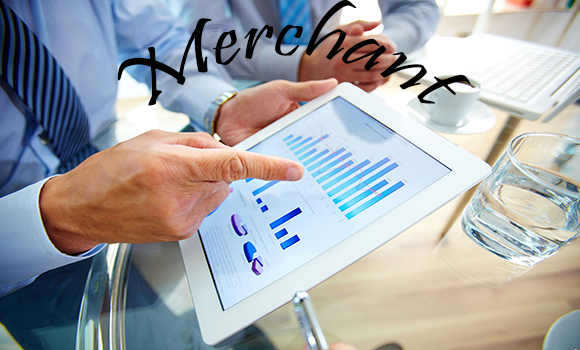
<style>
.page{position:relative;width:580px;height:350px}
.page>*{position:absolute;margin:0}
.t1{font:75px "Pristina-Regular";color:#000000}
</style>
<div class="page">
<p class="t1" style="left:117px;top:0px;width:354px;height:106px">Merchant</p>
</div>
